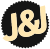
<style>
.page{position:relative;width:50px;height:49px;background:#151515}
.page>*{position:absolute;margin:0}
.t1{font:38.1px "NeutraTextTF-BoldItalic";letter-spacing:0.025em;color:#fee7b1;text-transform:uppercase}
</style>
<div class="page">
<p class="t1" style="left:2px;top:5px;width:45px;height:37px;rotate:-14deg">J&amp;J</p>
</div>
